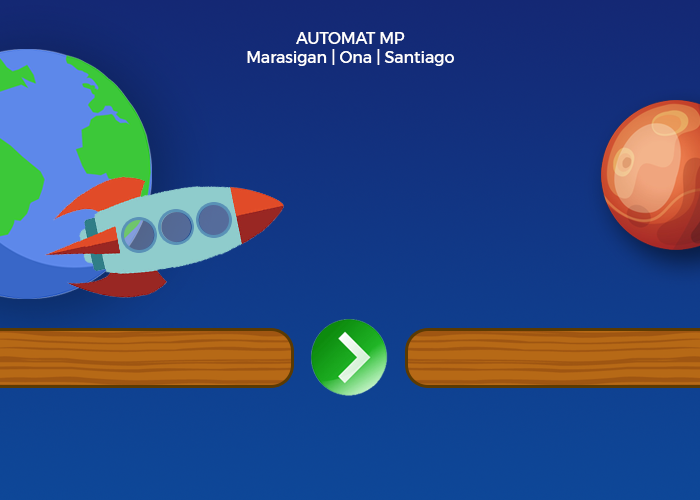
<style>
.page{position:relative;width:700px;height:500px}
.page>*{position:absolute;margin:0}
.t1{font:15.8px "Montserrat-Regular";color:#ffffff}
</style>
<div class="page">
<p class="t1" style="left:247px;top:32px;width:207px;height:34px;text-align:center">AUTOMAT MP<br>Marasigan | Ona | Santiago</p>
</div>
